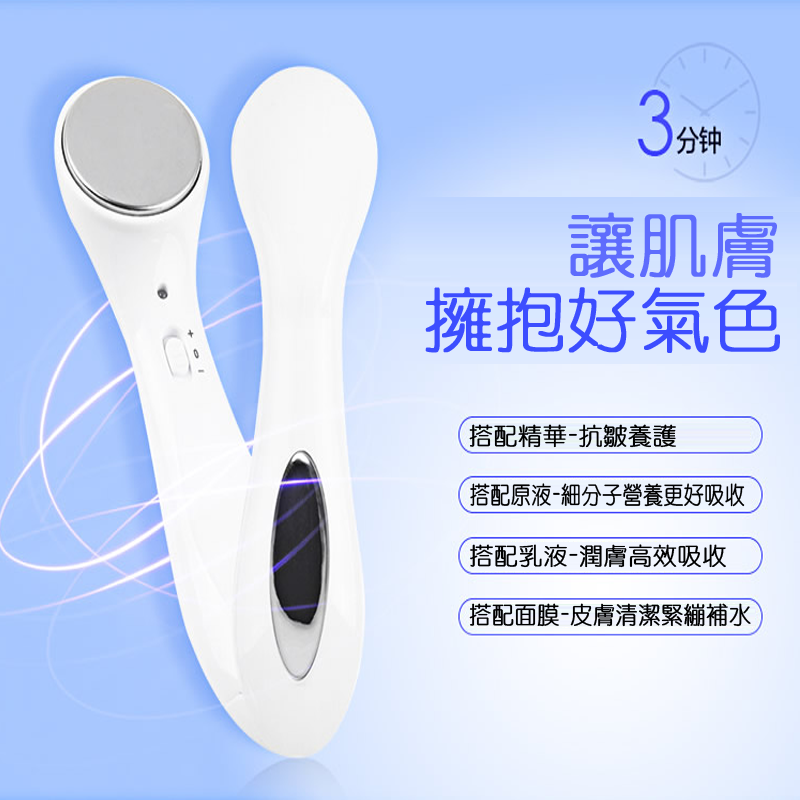
<style>
.page{position:relative;width:800px;height:800px}
.page>*{position:absolute;margin:0}
.t1{font:70.2px "HanWangYenLight";color:#5e6cfd;font-weight:bold}
.t2{font:70.4px "HanWangYenLight";color:#3c4dff;font-weight:bold}
.t3{font:24px "HanWangYenLight";color:#000000;font-weight:bold}
.t4{font:24px "HanWangYenLight";color:#000000;font-weight:bold;scale:0.83 1}
.t5{font:24px "HanWangYenLight";color:#000000;font-weight:bold;scale:0.92 1}
</style>
<div class="page">
<p class="t1" style="left:568px;top:212px;width:209px;height:66px">讓肌膚</p>
<p class="t2" style="left:425px;top:287px;width:355px;height:66px">擁抱好氣色</p>
<p class="t3" style="left:469px;top:424px;width:207px;height:24px">搭配精華-抗皺養護</p>
<p class="t4" style="left:470px;top:483px;width:275px;height:24px">搭配原液-細分子營養更好吸收</p>
<p class="t3" style="left:470px;top:544px;width:256px;height:24px">搭配乳液-潤膚高效吸收</p>
<p class="t5" style="left:469px;top:603px;width:282px;height:24px">搭配面膜-皮膚清潔緊繃補水</p>
</div>
